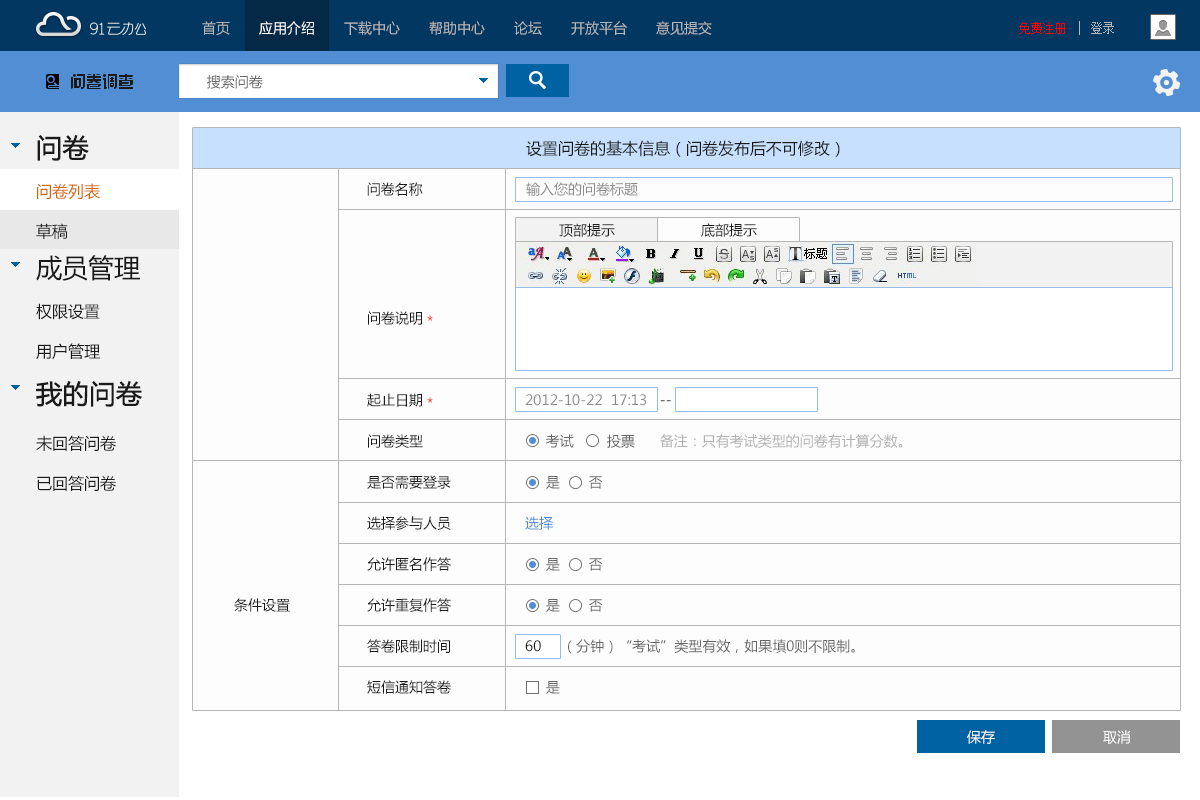
<style>
.page{position:relative;width:1200px;height:800px;background:#fdfdfd}
.page>*{position:absolute;margin:0}
.t1{font:14px "MicrosoftYaHei";color:#b6b6b6}
.t2{font:14px "MicrosoftYaHei";color:#ffffff}
.t3{font:12px "SimSun";color:#fe0000}
.t4{font:12px "SimSun";color:#b6b6b6}
.t5{font:14px "MicrosoftYaHei";color:#666666}
.t6{font:16px/40px "MicrosoftYaHei";color:#1a1a1a}
.t7{font:26px/40px "MicrosoftYaHei";color:#1a1a1a;font-weight:bold}
.t8{font:16px/40px "MicrosoftYaHei";color:#d16700}
.t9{font:26px/40px "MicrosoftYaHei";color:#1a1a1a}
.t10{font:26px/46px "MicrosoftYaHei";color:#1a1a1a;font-weight:bold}
.t11{font:16px/46px "MicrosoftYaHei";color:#1a1a1a}
.t12{font:16px "MicrosoftYaHei";color:#1a1a1a}
.t13{font:14px "MicrosoftYaHei";color:#1a1a1a}
.t14{font:14px "MicrosoftYaHei";color:#8b8b8b}
.t15{font:14px/41px "MicrosoftYaHei";color:#1a1a1a}
.t16{font:14px "MicrosoftYaHei"}
.t17{font:14px/41px "MicrosoftYaHei";color:#666666}
.t18{font:14px/36px "MicrosoftYaHei";color:#8b8b8b}
.t19{font:14px/36px "MicrosoftYaHei";color:#1a1a1a}
.t20{font:14px/41px "MicrosoftYaHei";color:#b2b2b2}
.t21{font:14px/41px "MicrosoftYaHei";color:#528ed3}
</style>
<div class="page">
<p class="t1" style="left:202px;top:21px;width:510px;height:14px">首页       <span class="t2">应用介绍</span>       下载中心       帮助中心       论坛       开放平台       意见提交</p>
<p class="t3" style="left:1019px;top:22px;width:95px;height:12px">免费注册<span class="t4">    登录</span></p>
<p class="t5" style="left:207px;top:75px;width:56px;height:14px">搜索问卷</p>
<p class="t6" style="left:36px;top:135px;width:106px;height:356px"><span class="t7">问卷<br></span><span class="t8">问卷列表<br></span>草稿<br><span class="t9">成员管理<br></span>权限设置<br>用户管理<br><span class="t10">我的问卷<br></span><span class="t11">未回答问卷<br></span>已回答问卷</p>
<p class="t12" style="left:526px;top:140px;width:314px;height:17px">设置问卷的基本信息（问卷发布后不可修改）</p>
<p class="t13" style="left:367px;top:182px;width:56px;height:14px">问卷名称</p>
<p class="t14" style="left:526px;top:182px;width:112px;height:14px">输入您的问卷标题</p>
<p class="t13" style="left:559px;top:223px;width:56px;height:14px">顶部提示</p>
<p class="t13" style="left:701px;top:223px;width:56px;height:14px">底部提示</p>
<p class="t15" style="left:367px;top:311px;width:84px;height:383px">问卷说明<br><br>起止日期<br>问卷类型<br>是否需要登录<br>选择参与人员<br>允许匿名作答<br>允许重复作答<br>答卷限制时间<br>短信通知答卷</p>
<p class="t16" style="left:427px;top:315px;width:6px;height:6px">*</p>
<p class="t16" style="left:427px;top:397px;width:6px;height:6px">*</p>
<p class="t17" style="left:525px;top:394px;width:378px;height:300px"><span class="t18"><br>2012-10-22  17:13 </span><span class="t19">  --<br></span>     考试        投票      <span class="t20">备注：只有考试类型的问卷有计算分数。<br></span>     是       否<br><span class="t21">选择<br></span>     是       否<br>     是       否<br><span class="t15">60</span>     （分钟）“考试”类型有效，如果填0则不限制。<br>     是</p>
<p class="t13" style="left:234px;top:598px;width:56px;height:14px">条件设置</p>
<p class="t2" style="left:967px;top:730px;width:28px;height:14px">保存</p>
<p class="t2" style="left:1103px;top:730px;width:28px;height:14px">取消</p>
</div>
